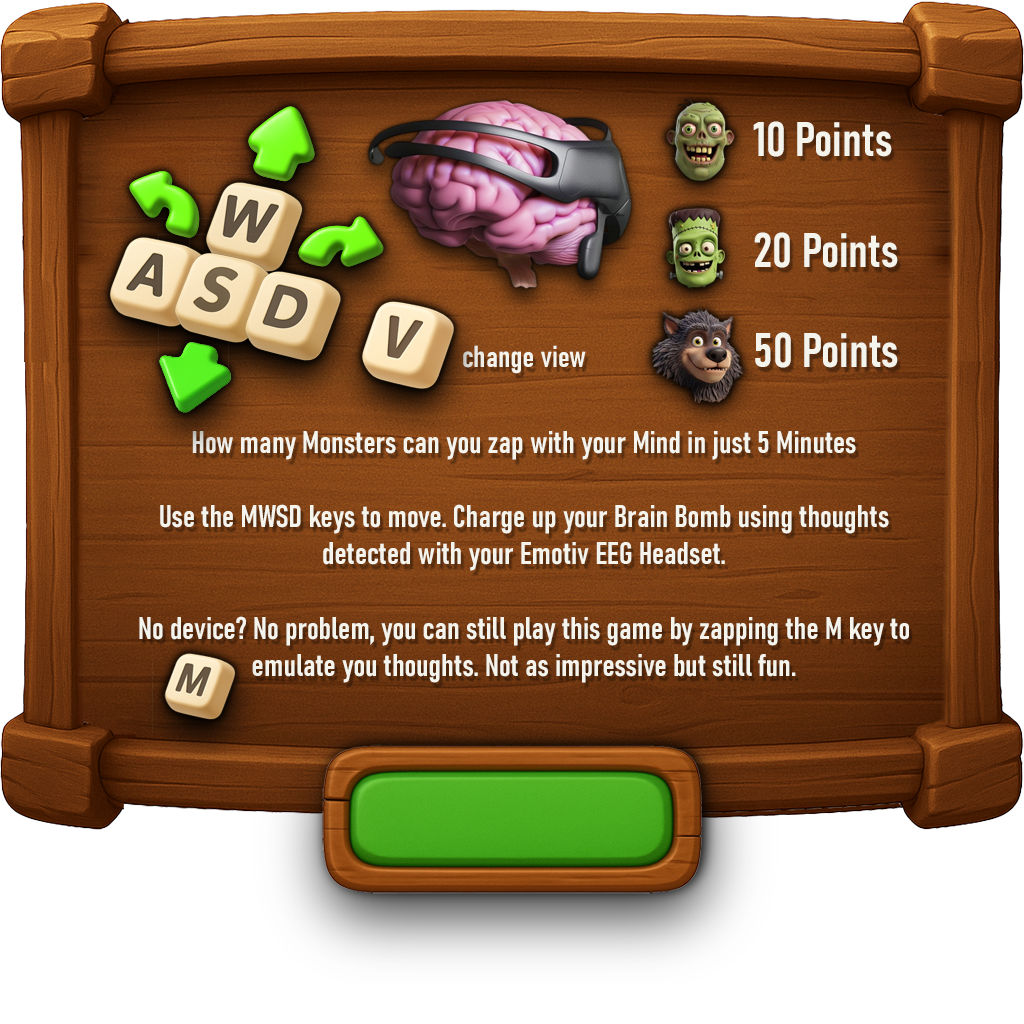
<style>
.page{position:relative;width:1024px;height:1024px}
.page>*{position:absolute;margin:0}
.t1{font:48px "Bahnschrift-SemiBoldCondensed";color:#f4f3ec}
.t2{font:30px "Bahnschrift-SemiBoldCondensed";color:#f4f3ec}
.t3{font:31px "Bahnschrift-SemiBoldCondensed";color:#f4f3ec}
</style>
<div class="page">
<p class="t1" style="left:753px;top:121px;width:139px;height:36px">10 Points</p>
<p class="t1" style="left:754px;top:232px;width:144px;height:36px">20 Points</p>
<p class="t1" style="left:755px;top:332px;width:143px;height:36px">50 Points</p>
<p class="t2" style="left:463px;top:345px;width:123px;height:29px">change view</p>
<p class="t3" style="left:139px;top:431px;width:770px;height:252px;text-align:center">How many Monsters can you zap with your Mind in just 5 Minutes<br><br>Use the MWSD keys to move. Charge up your Brain Bomb using thoughts detected with your Emotiv EEG Headset. <br><br>No device? No problem, you can still play this game by zapping the M key to emulate you thoughts. Not as impressive but still fun.</p>
</div>
